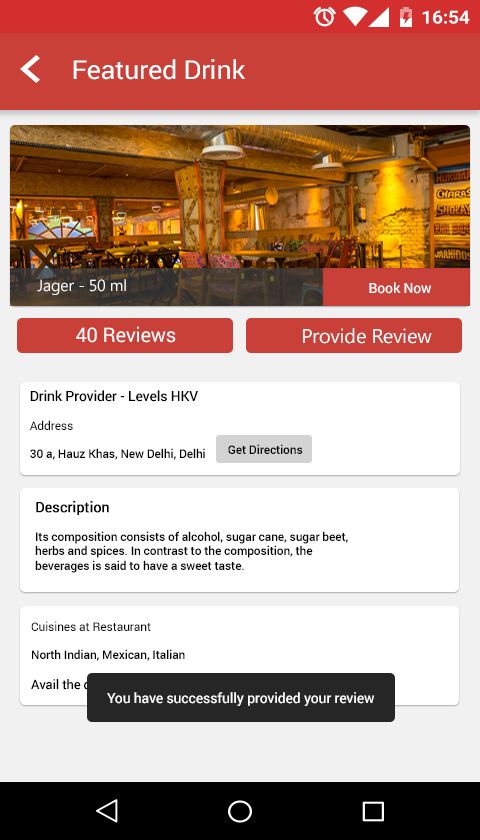
<style>
.page{position:relative;width:480px;height:840px;background:#ffffff}
.page>*{position:absolute;margin:0}
.t1{font:26.1px "Roboto-Regular";letter-spacing:-0.01em;color:#ffffff;scale:1.03 1}
.t2{font:16px "MicrosoftNewTaiLue";letter-spacing:-0.01em;color:#ffffff}
.t3{font:14px "Roboto-Medium";letter-spacing:-0.01em;color:#ffffff}
.t4{font:20px "Roboto-Regular";letter-spacing:-0.01em;color:#ffffff}
.t5{font:20px "Gadugi";letter-spacing:-0.01em;color:#ffffff}
.t6{font:12px "Roboto-Medium";letter-spacing:-0.01em;color:#000000}
.t7{font:14px "Roboto-Medium";letter-spacing:-0.01em;color:#000000}
.t8{font:12px "Roboto-Regular";letter-spacing:-0.01em;color:#000000}
.t9{font:14px "Roboto-Regular";letter-spacing:-0.01em;color:#000000;font-weight:bold}
.t10{font:13px "Roboto-Medium";letter-spacing:-0.01em;color:#000000}
</style>
<div class="page">
<p class="t1" style="left:73px;top:59px;width:173px;height:21px">Featured Drink</p>
<p class="t2" style="left:37px;top:279px;width:89px;height:16px">Jager - 50 ml</p>
<p class="t3" style="left:369px;top:282px;width:63px;height:12px">Book Now</p>
<p class="t4" style="left:76px;top:326px;width:100px;height:17px">40 Reviews</p>
<p class="t5" style="left:303px;top:328px;width:129px;height:16px">Provide Review</p>
<p class="t6" style="left:29px;top:390px;width:176px;height:70px"><span class="t7">Drink Provider - Levels HKV<br><br></span><span class="t8">Address<br></span><br>30 a, Hauz Khas, New Delhi, Delhi</p>
<p class="t6" style="left:228px;top:444px;width:75px;height:10px">Get Directions</p>
<p class="t6" style="left:35px;top:501px;width:313px;height:72px"><span class="t9">Description<br></span><br>Its composition consists of alcohol, sugar cane, sugar beet, <br>herbs and spices. In contrast to the composition, the <br>beverages is said to have a sweet taste.</p>
<p class="t10" style="left:31px;top:621px;width:179px;height:69px"><span class="t8"><br>Cuisines at Restaurant<br></span><span class="t6"><br>North Indian, Mexican, Italian<br><br></span>Avail the drink before 11:59 PM</p>
<p class="t3" style="left:107px;top:692px;width:268px;height:14px">You have successfully provided your review</p>
</div>
